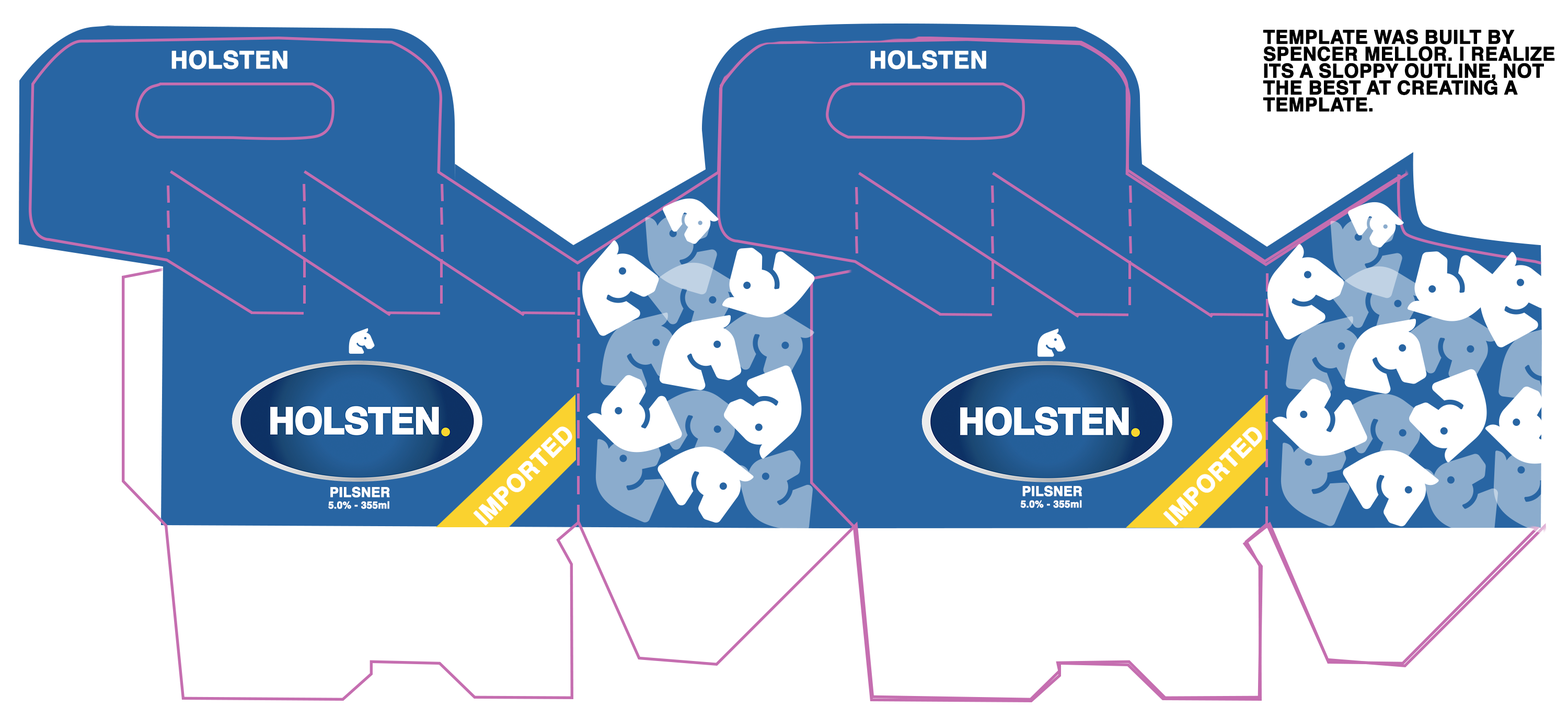
<style>
.page{position:relative;width:1568px;height:719px;background:#ffffff}
.page>*{position:absolute;margin:0}
.t1{font:19px/8.4px "Helvetica-Bold";color:#000000;font-weight:bold}
.t2{font:23.9px "Helvetica-Bold";color:#ffffff;font-weight:bold}
.t3{font:13.5px "Helvetica-Bold";color:#ffffff;font-weight:bold}
.t4{font:9.8px "Helvetica-Bold";color:#ffffff;font-weight:bold}
</style>
<div class="page">
<p class="t1" style="left:1263px;top:29px;width:292px;height:83px">TEMPLATE WAS BUILT BY <br><br>SPENCER MELLOR. I REALIZE<br><br>ITS A SLOPPY OUTLINE, NOT<br><br>THE BEST AT CREATING A <br><br>TEMPLATE.</p>
<p class="t2" style="left:171px;top:50px;width:116px;height:20px">HOLSTEN</p>
<p class="t3" style="left:1022px;top:486px;width:60px;height:11px">PILSNER</p>
<p class="t3" style="left:330px;top:487px;width:60px;height:11px">PILSNER</p>
<p class="t4" style="left:328px;top:501px;width:61px;height:8px">5.0% - 355ml</p>
<p class="t4" style="left:1020px;top:500px;width:62px;height:8px">5.0% - 355ml</p>
</div>
